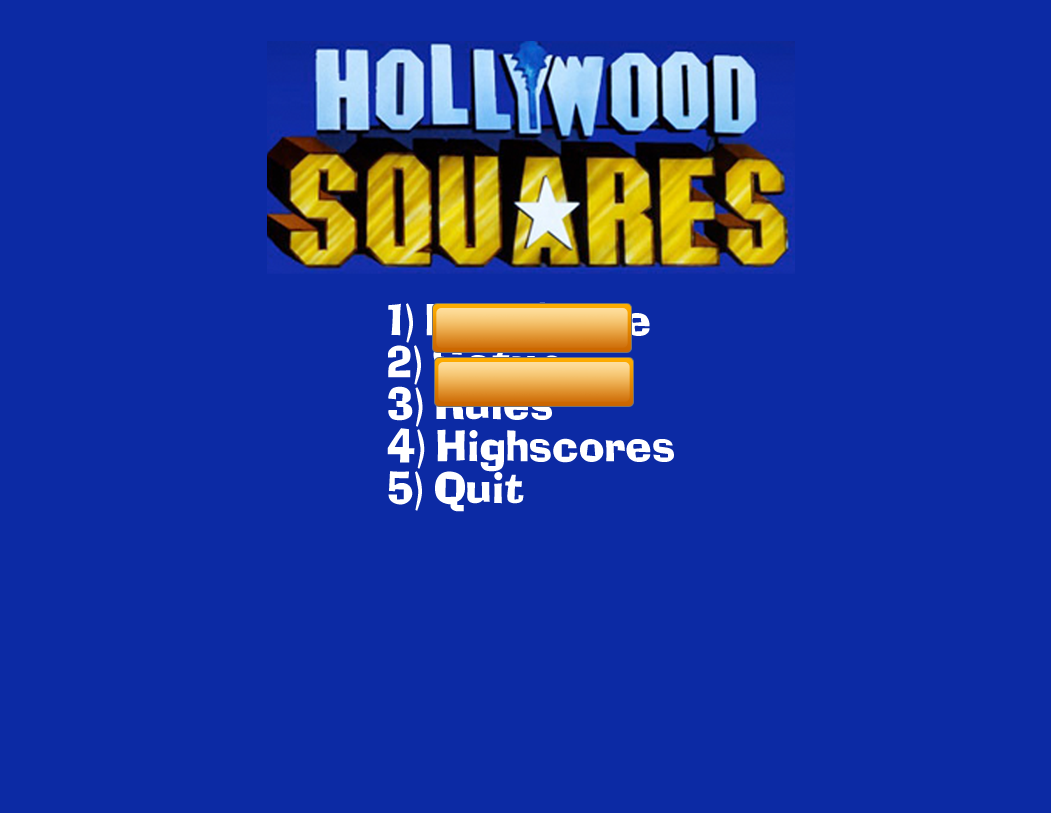
<style>
.page{position:relative;width:1051px;height:813px;background:#0c2aa4}
.page>*{position:absolute;margin:0}
.t1{font:42px/42px "AdLib";color:#ffffff}
.t2{font:42px/17.5px "AdLib";color:#ffffff}
</style>
<div class="page">
<p class="t1" style="left:387px;top:302px;width:287px;height:210px"><span class="t2">1) Play Game<br></span>2) Setup<br>3) Rules<br>4) Highscores<br>5) Quit</p>
</div>
